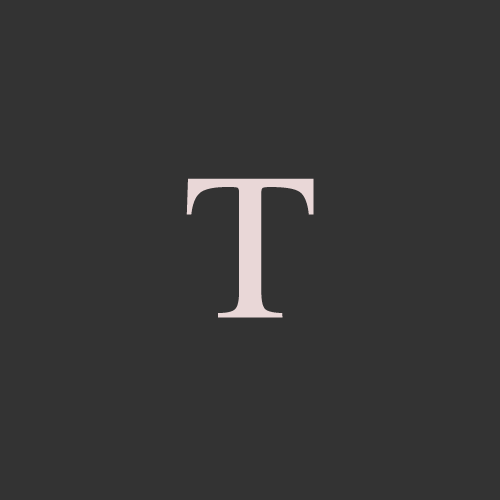
<style>
.page{position:relative;width:500px;height:500px;background:#333333}
.page>*{position:absolute;margin:0}
.t1{font:200px "Dutch801BT-Roman";letter-spacing:0.2em;color:#e9d7d7}
</style>
<div class="page">
<p class="t1" style="left:186px;top:178px;width:128px;height:140px">T</p>
</div>
